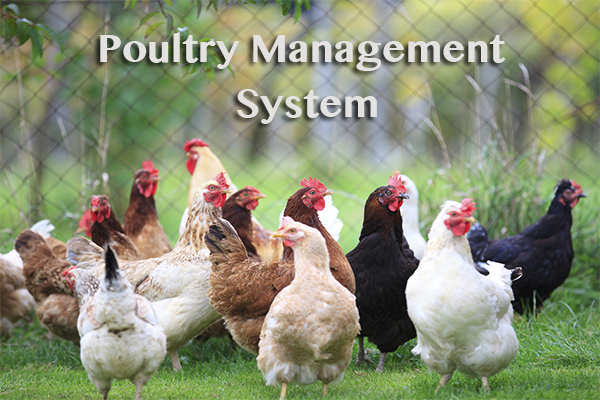
<style>
.page{position:relative;width:600px;height:400px}
.page>*{position:absolute;margin:0}
.t1{font:45.8px "KhmerMN-Bold";color:#e4e2e0}
</style>
<div class="page">
<p class="t1" style="left:100px;top:32px;width:406px;height:92px;text-align:center">Poultry Management <br>System</p>
</div>
